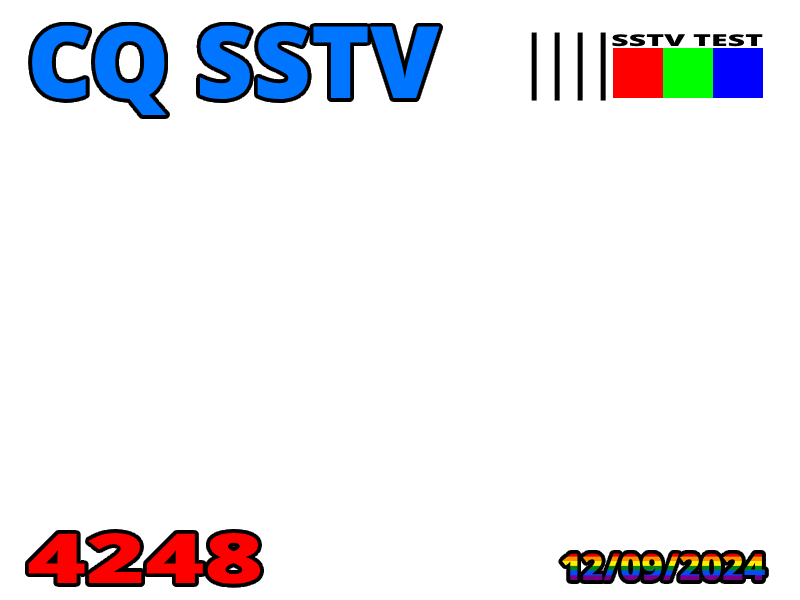
<style>
.page{position:relative;width:800px;height:600px;background:#ffffff}
.page>*{position:absolute;margin:0}
.t1{font:100px "OpenSans-Extrabold";color:#0075ff}
.t2{font:16.3px "OpenSans-Extrabold";color:#000000;scale:1.86 1}
.t3{font:68.9px "OpenSans-Extrabold";color:#ff0000;scale:1.46 1}
.t4{font:36.8px "OpenSans-Extrabold"}
</style>
<div class="page">
<p class="t1" style="left:32px;top:25px;width:408px;height:90px">CQ SSTV</p>
<p class="t1" style="left:32px;top:25px;width:408px;height:90px">CQ SSTV</p>
<p class="t2" style="left:612px;top:34px;width:151px;height:13px">SSTV TEST</p>
<p class="t3" style="left:28px;top:533px;width:233px;height:51px">4248</p>
<p class="t4" style="left:562px;top:553px;width:203px;height:28px">12/09/2024</p>
</div>
